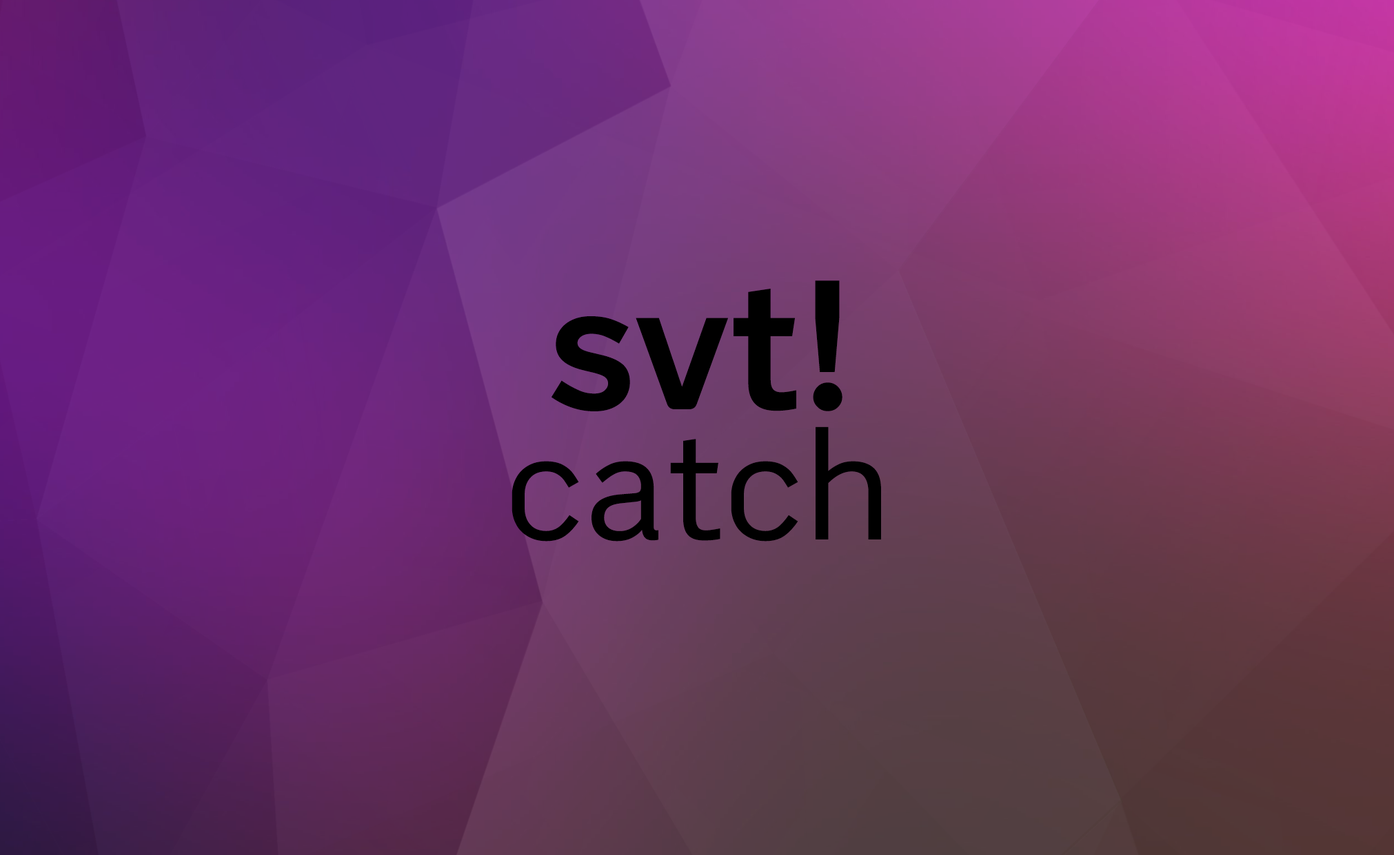
<style>
.page{position:relative;width:1394px;height:855px}
.page>*{position:absolute;margin:0}
.t1{font:183.8px "PublikBold";color:#000000}
.t2{font:156.3px "PublikRegularBook";color:#000000}
</style>
<div class="page">
<p class="t1" style="left:551px;top:281px;width:291px;height:131px">svt!</p>
<p class="t2" style="left:511px;top:427px;width:370px;height:115px">catch</p>
</div>
